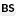
<style>
.page{position:relative;width:16px;height:16px}
.page>*{position:absolute;margin:0}
.t1{font:11px "Lato-Black";color:#050200}
</style>
<div class="page">
<p class="t1" style="left:2px;top:4px;width:13px;height:8px">BS</p>
</div>
